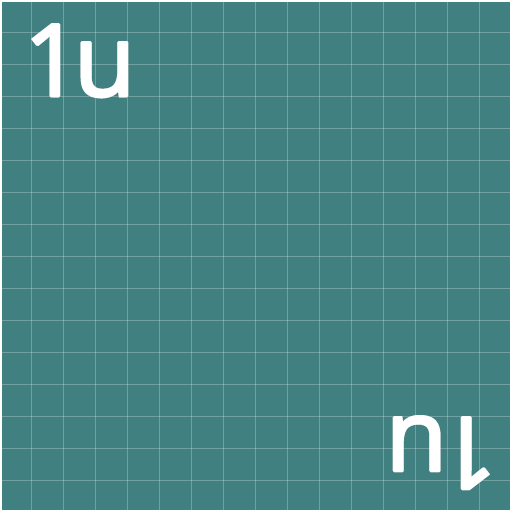
<style>
.page{position:relative;width:512px;height:512px;background:#408080}
.page>*{position:absolute;margin:0}
.t1{font:100px "OpenSans";color:#ffffff;font-weight:bold}
</style>
<div class="page">
<p class="t1" style="left:31px;top:23px;width:98px;height:76px">1u</p>
<p class="t1" style="left:392px;top:415px;width:98px;height:76px;rotate:180deg">1u</p>
</div>
